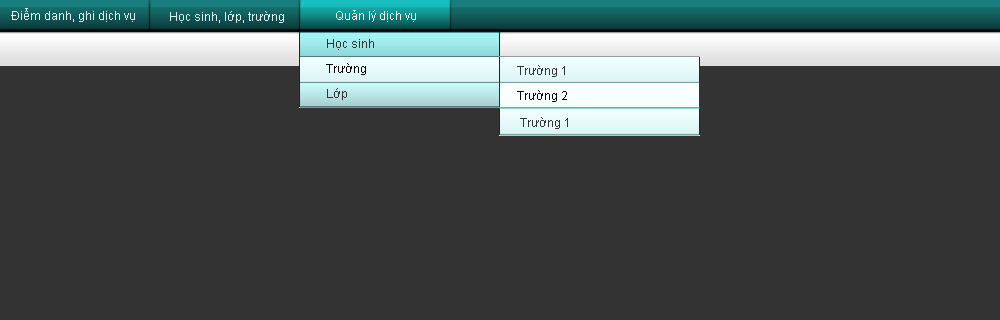
<style>
.page{position:relative;width:1000px;height:320px;background:#333333}
.page>*{position:absolute;margin:0}
.t1{font:12px "ArialMT";color:#def0ed}
.t2{font:12px "ArialMT";color:#f8fbfb}
.t3{font:12px "ArialMT";color:#333333}
.t4{font:12px "ArialMT";color:#000000}
</style>
<div class="page">
<p class="t1" style="left:11px;top:8px;width:124px;height:14px">Điểm danh, ghi dịch vụ</p>
<p class="t1" style="left:170px;top:11px;width:114px;height:12px">Học sinh, lớp, trường</p>
<p class="t2" style="left:336px;top:10px;width:80px;height:12px">Quản lý dịch vụ</p>
<p class="t3" style="left:327px;top:39px;width:47px;height:11px">Học sinh</p>
<p class="t4" style="left:326px;top:63px;width:40px;height:12px">Trường</p>
<p class="t3" style="left:517px;top:65px;width:48px;height:12px">Trường 1</p>
<p class="t3" style="left:327px;top:88px;width:20px;height:12px">Lớp</p>
<p class="t4" style="left:517px;top:90px;width:50px;height:12px">Trường 2</p>
<p class="t3" style="left:520px;top:117px;width:48px;height:12px">Trường 1</p>
</div>
